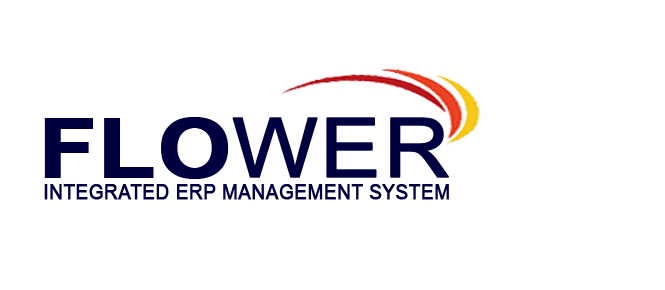
<style>
.page{position:relative;width:665px;height:290px;background:#ffffff}
.page>*{position:absolute;margin:0}
.t1{font:81.8px "Arial-BoldMT";color:#000041;font-weight:bold;scale:1.14 1}
.t2{font:83.3px "ArialNarrow";color:#000041;font-weight:bold;scale:1.33 1}
.t3{font:21.1px "ArialNarrow";color:#000041;font-weight:bold;scale:1.09 1}
</style>
<div class="page">
<p class="t1" style="left:44px;top:117px;width:185px;height:62px">FLO</p>
<p class="t2" style="left:232px;top:117px;width:218px;height:61px">WER</p>
<p class="t3" style="left:44px;top:184px;width:405px;height:16px">INTEGRATED ERP MANAGEMENT SYSTEM</p>
</div>
